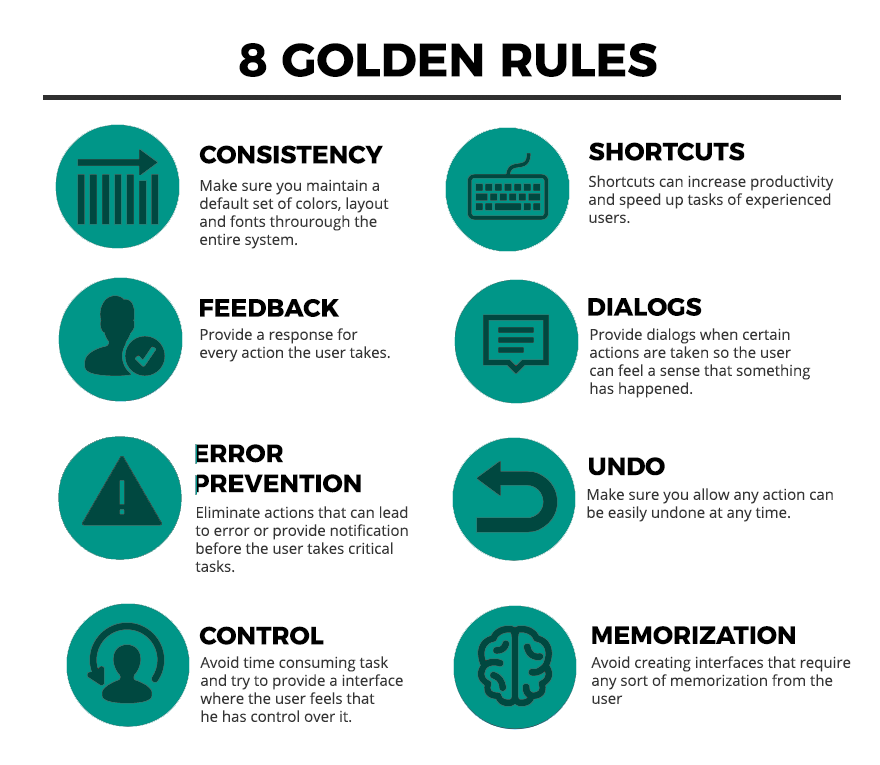
<style>
.page{position:relative;width:880px;height:765px;background:#ffffff}
.page>*{position:absolute;margin:0}
.t1{font:47px "Montserrat-Bold";color:#000000}
.t2{font:25px "Montserrat-Bold";color:#000000}
.t3{font:15px/18px "OpenSans";color:#353535}
</style>
<div class="page">
<p class="t1" style="left:239px;top:43px;width:418px;height:34px">8 GOLDEN RULES</p>
<p class="t2" style="left:199px;top:145px;width:184px;height:19px">CONSISTENCY</p>
<p class="t2" style="left:589px;top:142px;width:156px;height:19px">SHORTCUTS</p>
<p class="t3" style="left:200px;top:179px;width:189px;height:70px">Make sure you maintain a <br>default set of colors, layout<br>and fonts throurough the<br>entire system.</p>
<p class="t3" style="left:589px;top:175px;width:245px;height:49px">Shortcuts can increase productivity<br>and speed up tasks of experienced<br>users.</p>
<p class="t2" style="left:200px;top:299px;width:140px;height:18px">FEEDBACK</p>
<p class="t2" style="left:588px;top:297px;width:114px;height:19px">DIALOGS</p>
<p class="t3" style="left:200px;top:328px;width:190px;height:34px">Provide a response for <br>every action the user takes.</p>
<p class="t3" style="left:590px;top:328px;width:221px;height:70px">Provide dialogs when certain <br>actions are taken so the user<br>can feel a sense that something<br>has happened.</p>
<p class="t2" style="left:194px;top:444px;width:167px;height:49px">ERROR<br>PREVENTION</p>
<p class="t2" style="left:589px;top:457px;width:76px;height:19px">UNDO</p>
<p class="t3" style="left:587px;top:488px;width:246px;height:34px">Make sure you allow any action can<br>be easily undone at any time.</p>
<p class="t3" style="left:195px;top:506px;width:213px;height:67px">Eliminate actions that can lead <br>to error or provide notification <br>before the user takes critical <br>tasks.</p>
<p class="t2" style="left:199px;top:626px;width:125px;height:19px">CONTROL</p>
<p class="t2" style="left:592px;top:626px;width:203px;height:19px">MEMORIZATION</p>
<p class="t3" style="left:200px;top:656px;width:203px;height:67px">Avoid time consuming task<br>and try to provide a interface<br>where the user feels that <br>he has control over it.</p>
<p class="t3" style="left:591px;top:656px;width:260px;height:48px">Avoid creating interfaces that require<br>any sort of memorization from the<br>user</p>
</div>
